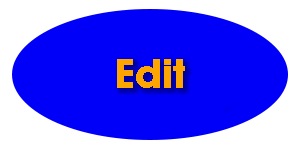
<style>
.page{position:relative;width:300px;height:150px;background:#0000f8}
.page>*{position:absolute;margin:0}
.t1{font:41px "AWPCAvantGuardBold";color:#ffa500}
</style>
<div class="page">
<p class="t1" style="left:117px;top:59px;width:68px;height:29px">Edit</p>
</div>
